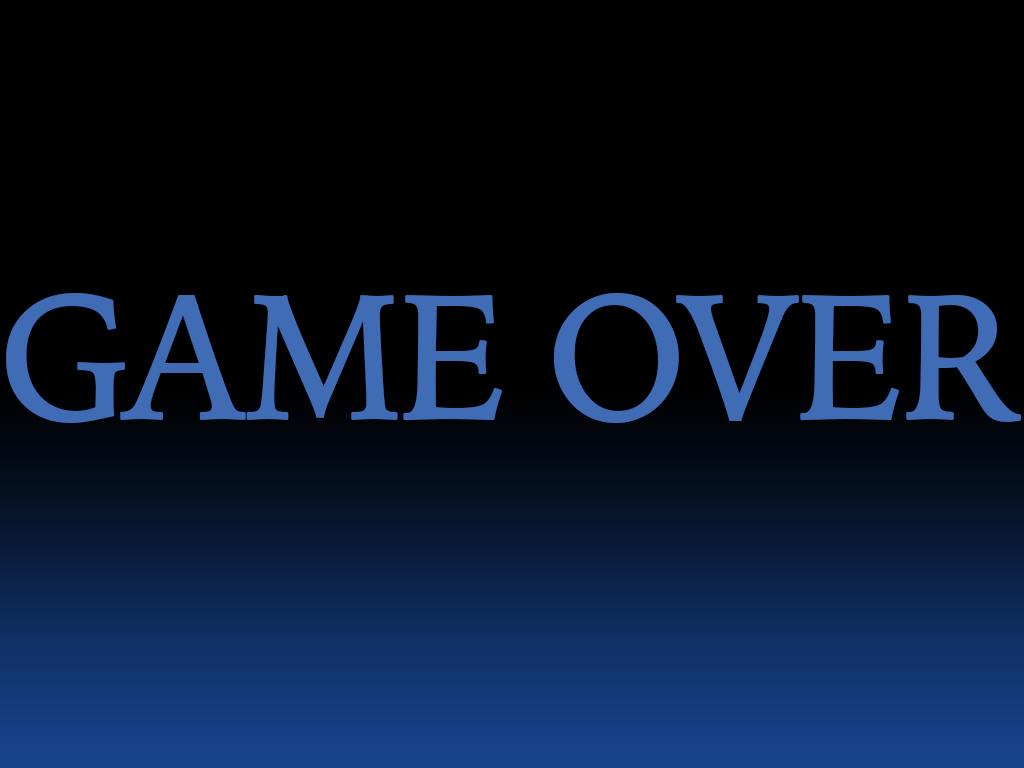
<style>
.page{position:relative;width:1024px;height:768px;background:#000000}
.page>*{position:absolute;margin:0}
.t1{font:176.4px "IowanOldStyle-Roman";letter-spacing:-0.05em;color:#406cb6;font-weight:bold}
</style>
<div class="page">
<p class="t1" style="left:6px;top:293px;width:1015px;height:130px">GAME OVER</p>
</div>
